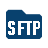
<style>
.page{position:relative;width:48px;height:48px;background:#ffffff}
.page>*{position:absolute;margin:0}
.t1{font:18px "Impact";color:#ffffff}
</style>
<div class="page">
<p class="t1" style="left:8px;top:21px;width:32px;height:14px">SFTP</p>
</div>
